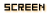
<style>
.page{position:relative;width:50px;height:14px;background:#ffffff}
.page>*{position:absolute;margin:0}
.t1{font:11px "04b03b";color:#000000}
</style>
<div class="page">
<p class="t1" style="left:4px;top:3px;width:41px;height:8px">SCREEN</p>
</div>
